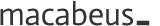
<style>
.page{position:relative;width:160px;height:26px;background:#ffffff}
.page>*{position:absolute;margin:0}
.t1{font:32px "Actor-Regular";color:#333333}
</style>
<div class="page">
<p class="t1" style="left:0px;top:0px;width:134px;height:26px">macabeus</p>
</div>
